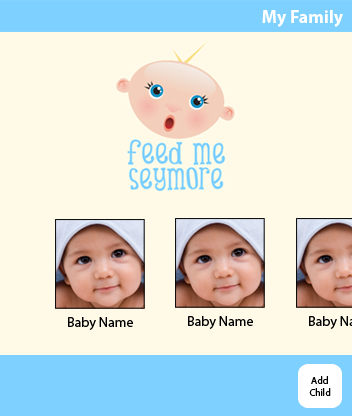
<style>
.page{position:relative;width:352px;height:416px;background:#fffae8}
.page>*{position:absolute;margin:0}
.t1{font:18px "MyriadPro-Bold";color:#ffffff}
.t2{font:14px "MyriadPro-Regular";color:#000000}
.t3{font:10px "MyriadPro-Regular";color:#000000}
</style>
<div class="page">
<p class="t1" style="left:262px;top:10px;width:81px;height:17px">My Family</p>
<p class="t2" style="left:68px;top:317px;width:65px;height:13px">Baby Name</p>
<p class="t2" style="left:188px;top:316px;width:65px;height:13px">Baby Name</p>
<p class="t3" style="left:309px;top:376px;width:22px;height:20px;text-align:center">Add<br>Child</p>
</div>
